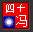
<style>
.page{position:relative;width:33px;height:32px;background:#f20000}
.page>*{position:absolute;margin:0}
.t1{font:10.4px "SimSun";color:#ffffff}
.t2{font:11.7px "SimSun";color:#ffffff}
</style>
<div class="page">
<p class="t1" style="left:6px;top:4px;width:19px;height:9px">四十</p>
<p class="t2" style="left:16px;top:15px;width:11px;height:12px">冯</p>
</div>
